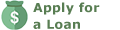
<style>
.page{position:relative;width:120px;height:30px;background:#ffffff}
.page>*{position:absolute;margin:0}
.t1{font:12.5px/16.7px "Verdana-Bold";letter-spacing:0.025em;color:#587d52}
</style>
<div class="page">
<p class="t1" style="left:33px;top:2px;width:67px;height:27px">Apply for<br>a Loan</p>
</div>
